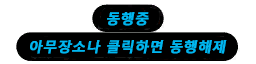
<style>
.page{position:relative;width:256px;height:64px;background:#ffffff}
.page>*{position:absolute;margin:0}
.t1{font:14px/28px "MalgunGothicBold";color:#00b6ef;font-weight:bold;font-style:italic}
</style>
<div class="page">
<p class="t1" style="left:30px;top:12px;width:197px;height:42px;text-align:center">동행중<br>아무장소나 클릭하면 동행해제</p>
</div>
